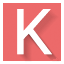
<style>
.page{position:relative;width:64px;height:64px;background:#ec6a6a}
.page>*{position:absolute;margin:0}
.t1{font:63.4px "Roboto-Regular";letter-spacing:0.025em;color:#ffffff}
</style>
<div class="page">
<p class="t1" style="left:17px;top:9px;width:35px;height:46px">K</p>
</div>
